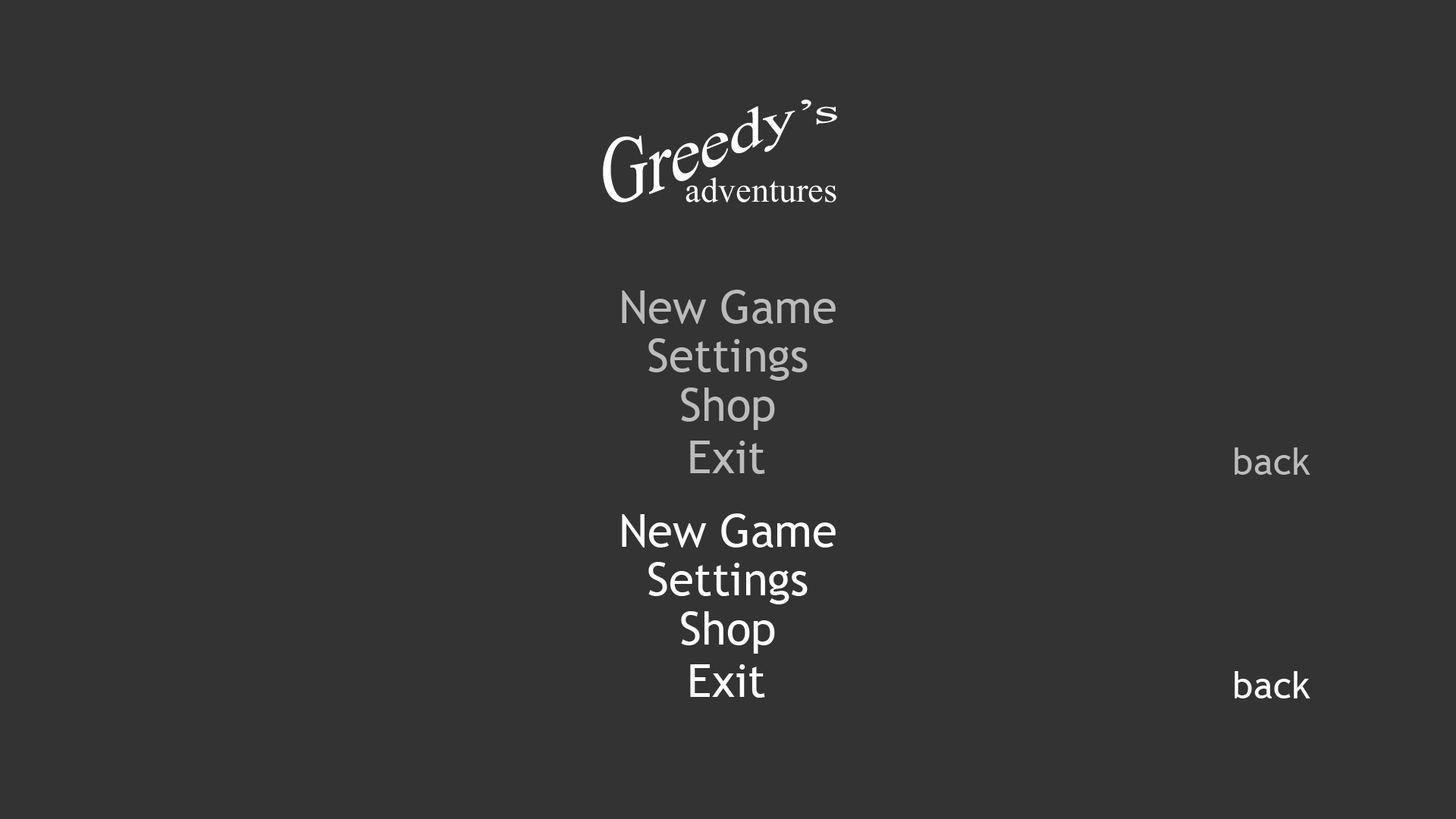
<style>
.page{position:relative;width:1456px;height:819px;background:#333333}
.page>*{position:absolute;margin:0}
.t1{font:98.6px "MicrosoftHimalaya";color:#fffefe}
.t2{font:52.3px "MicrosoftHimalaya";color:#fffefe}
.t3{font:45.5px "TrebuchetMS";color:#bbbbbb}
.t4{font:45.5px "TrebuchetMS";color:#bcbcbc}
.t5{font:37.2px "TrebuchetMS";color:#bcbcbc}
.t6{font:45.5px "TrebuchetMS";color:#ffffff}
.t7{font:37.2px "TrebuchetMS";color:#ffffff}
</style>
<div class="page">
<p class="t1" style="left:603px;top:99px;width:234px;height:103px">Greedy’s</p>
<p class="t2" style="left:686px;top:177px;width:150px;height:25px">adventures</p>
<p class="t3" style="left:622px;top:290px;width:214px;height:34px">New Game</p>
<p class="t4" style="left:648px;top:338px;width:160px;height:43px">Settings</p>
<p class="t4" style="left:681px;top:388px;width:94px;height:42px">Shop</p>
<p class="t4" style="left:690px;top:441px;width:75px;height:33px">Exit</p>
<p class="t5" style="left:1235px;top:447px;width:75px;height:28px">back</p>
<p class="t6" style="left:622px;top:513px;width:214px;height:35px">New Game</p>
<p class="t6" style="left:648px;top:562px;width:160px;height:42px">Settings</p>
<p class="t6" style="left:681px;top:611px;width:94px;height:43px">Shop</p>
<p class="t6" style="left:690px;top:664px;width:75px;height:34px">Exit</p>
<p class="t7" style="left:1235px;top:671px;width:75px;height:27px">back</p>
</div>
